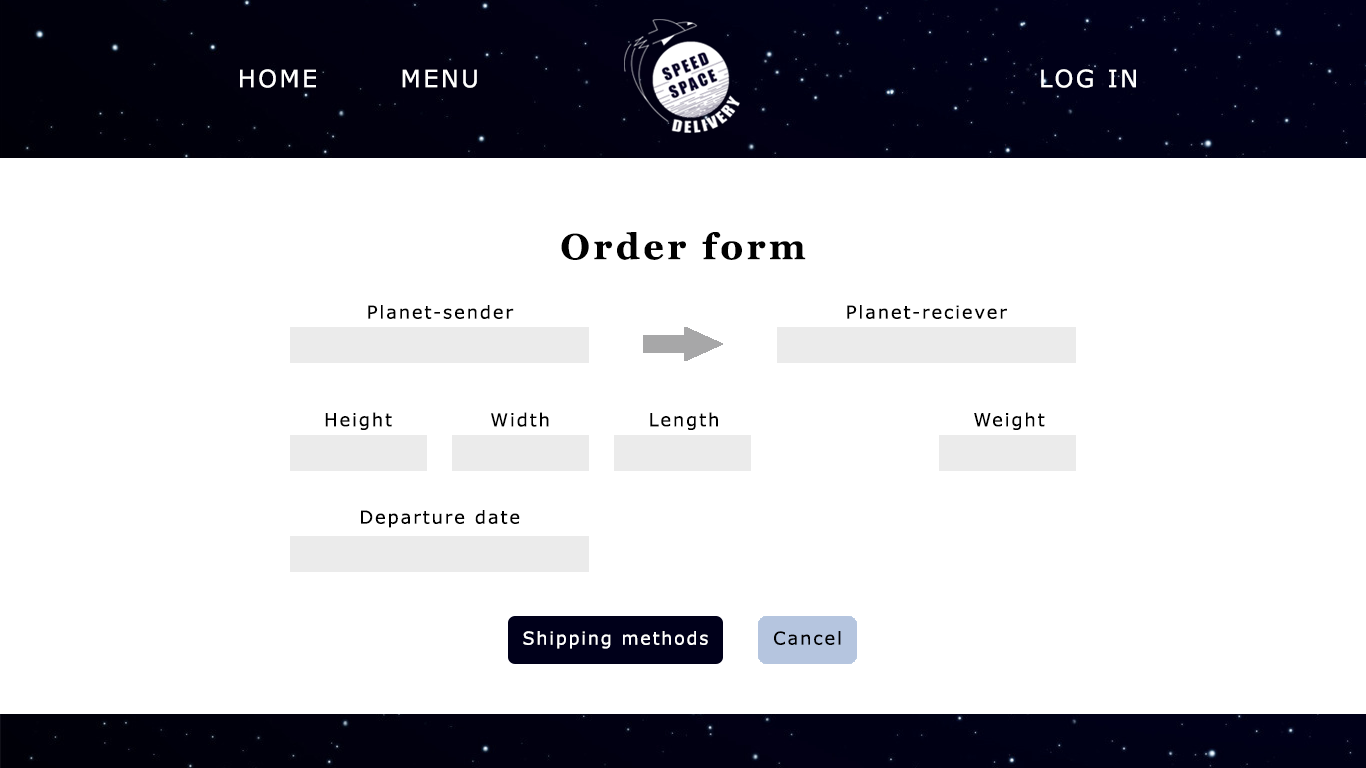
<style>
.page{position:relative;width:1366px;height:768px;background:#ffffff}
.page>*{position:absolute;margin:0}
.t1{font:24px "Verdana";letter-spacing:0.1em;color:#ffffff}
.t2{font:36px "Georgia-Bold";letter-spacing:0.1em;color:#000000}
.t3{font:18px "Verdana";letter-spacing:0.1em;color:#000000}
.t4{font:18px "Verdana";letter-spacing:0.1em;color:#ffffff}
.t5{font:18px "Verdana";letter-spacing:0.1em;color:#000001}
</style>
<div class="page">
<p class="t1" style="left:240px;top:69px;width:76px;height:19px">HOME</p>
<p class="t1" style="left:402px;top:69px;width:75px;height:19px">MENU</p>
<p class="t1" style="left:1041px;top:69px;width:95px;height:19px">LOG IN</p>
<p class="t2" style="left:561px;top:232px;width:245px;height:28px">Order form</p>
<p class="t3" style="left:368px;top:305px;width:146px;height:14px">Planet-sender</p>
<p class="t3" style="left:847px;top:305px;width:160px;height:14px">Planet-reciever</p>
<p class="t3" style="left:325px;top:412px;width:67px;height:18px">Height</p>
<p class="t3" style="left:491px;top:412px;width:58px;height:15px">Width</p>
<p class="t3" style="left:650px;top:412px;width:68px;height:18px">Length</p>
<p class="t3" style="left:974px;top:412px;width:71px;height:18px">Weight</p>
<p class="t3" style="left:361px;top:510px;width:159px;height:18px">Departure date</p>
<p class="t4" style="left:523px;top:631px;width:185px;height:18px">Shipping methods</p>
<p class="t5" style="left:774px;top:631px;width:67px;height:14px">Cancel</p>
</div>
